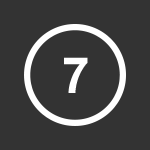
<style>
.page{position:relative;width:150px;height:150px;background:#333333}
.page>*{position:absolute;margin:0}
.t1{font:50px "Arial-BoldMT";color:#ffffff}
</style>
<div class="page">
<p class="t1" style="left:64px;top:57px;width:24px;height:36px">7</p>
</div>
